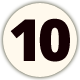
<style>
.page{position:relative;width:80px;height:80px;background:#fff9ed}
.page>*{position:absolute;margin:0}
.t1{font:58.2px "OpenSans-Extrabold";letter-spacing:-0.08em;color:#150003}
</style>
<div class="page">
<p class="t1" style="left:10px;top:18px;width:60px;height:44px">10</p>
</div>
